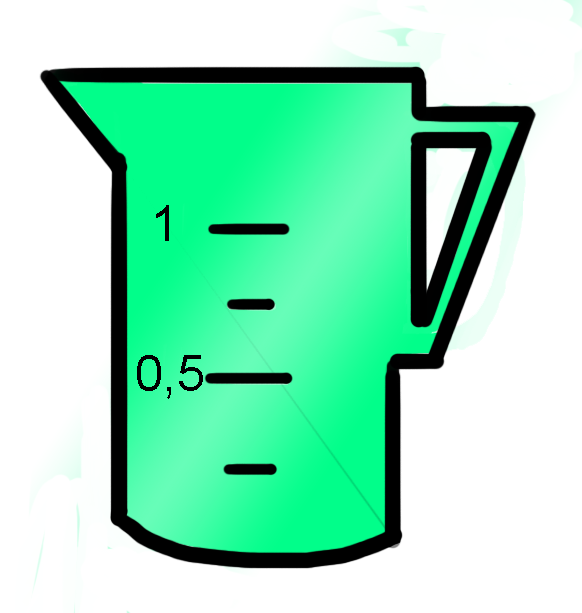
<style>
.page{position:relative;width:582px;height:613px;background:#ffffff}
.page>*{position:absolute;margin:0}
.t1{font:50px "ArialMT";color:#000000}
.t2{font:12px "ArialMT";color:#000000}
</style>
<div class="page">
<p class="t1" style="left:156px;top:205px;width:13px;height:36px">1</p>
<p class="t2" style="left:137px;top:355px;width:66px;height:44px">0,5</p>
</div>
